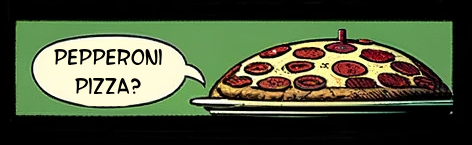
<style>
.page{position:relative;width:472px;height:145px;background:#000000}
.page>*{position:absolute;margin:0}
.t1{font:24px "SFWonderComic";color:#000000}
</style>
<div class="page">
<p class="t1" style="left:54px;top:48px;width:108px;height:47px;text-align:center">pepperoni pizza?</p>
</div>
